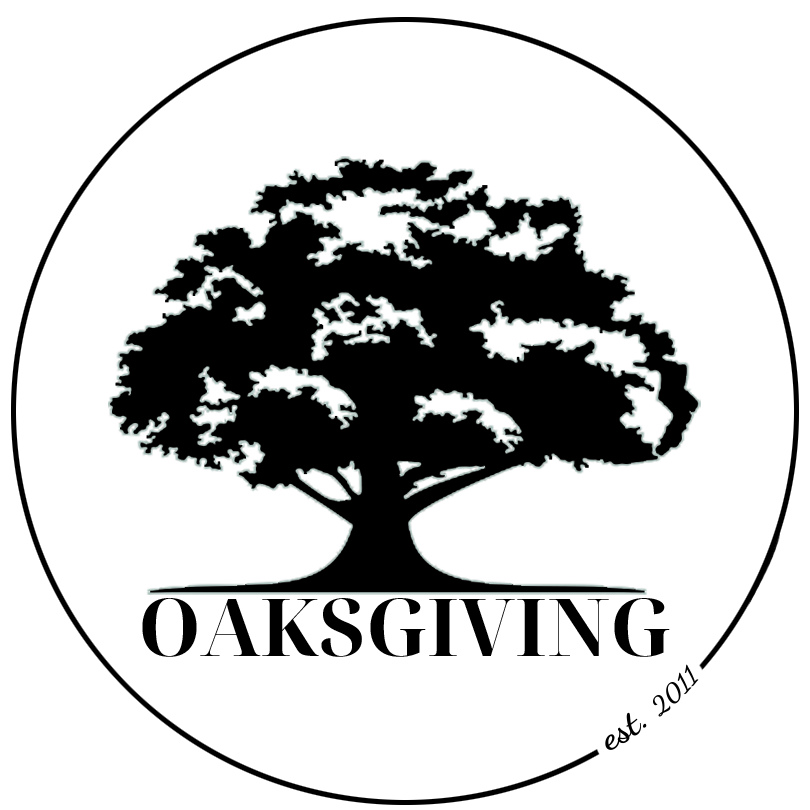
<style>
.page{position:relative;width:810px;height:810px;background:#ffffff}
.page>*{position:absolute;margin:0}
.t1{font:80px "NotoSerifDisplay-Bold";color:#000000}
.t2{font:36px "DancingScript-Bold";color:#000000}
.t3{font:24px "DancingScript-Bold";color:#000000}
</style>
<div class="page">
<p class="t1" style="left:142px;top:598px;width:528px;height:59px">OAKSGIVING</p>
<p class="t2" style="left:605px;top:664px;width:94px;height:86px;rotate:-39deg">est. <span class="t3">2011</span></p>
</div>
